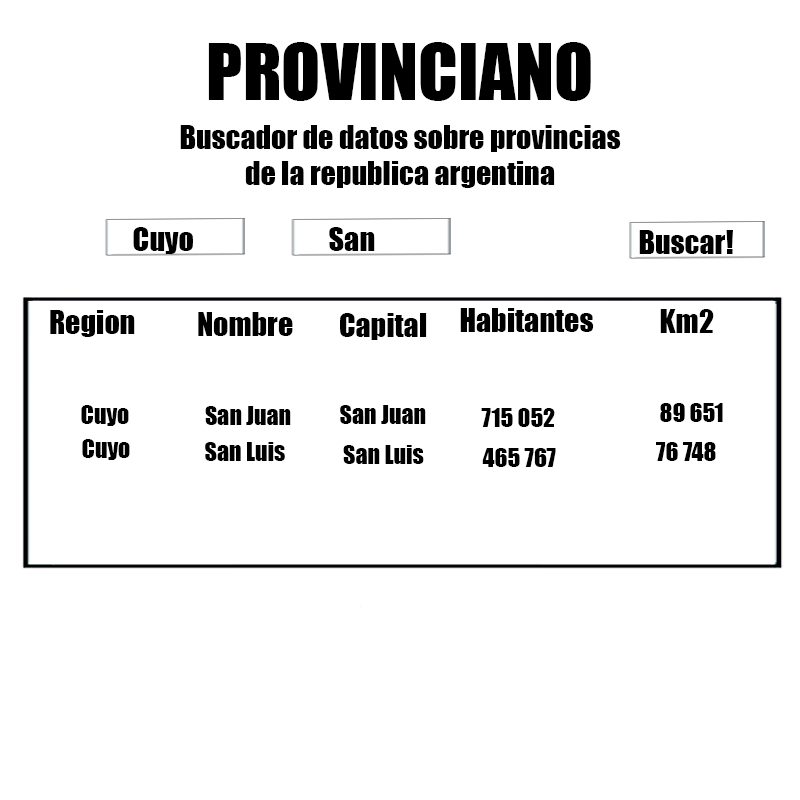
<style>
.page{position:relative;width:800px;height:800px;background:#ffffff}
.page>*{position:absolute;margin:0}
.t1{font:72px "Impact";color:#000000}
.t2{font:30px "Impact";color:#000000}
.t3{font:24px "Impact";color:#000000}
</style>
<div class="page">
<p class="t1" style="left:208px;top:42px;width:383px;height:59px">PROVINCIANO</p>
<p class="t2" style="left:180px;top:125px;width:441px;height:63px;text-align:center">Buscador de datos sobre provincias<br>de la republica argentina</p>
<p class="t2" style="left:133px;top:227px;width:60px;height:27px">Cuyo</p>
<p class="t2" style="left:329px;top:227px;width:46px;height:24px">San</p>
<p class="t2" style="left:639px;top:230px;width:94px;height:24px">Buscar!</p>
<p class="t2" style="left:50px;top:310px;width:85px;height:27px">Region</p>
<p class="t2" style="left:198px;top:312px;width:95px;height:24px">Nombre</p>
<p class="t2" style="left:340px;top:313px;width:87px;height:27px">Capital</p>
<p class="t2" style="left:460px;top:308px;width:134px;height:24px">Habitantes</p>
<p class="t2" style="left:660px;top:309px;width:54px;height:24px">Km2</p>
<p class="t3" style="left:81px;top:405px;width:48px;height:21px">Cuyo</p>
<p class="t3" style="left:205px;top:406px;width:86px;height:19px">San Juan</p>
<p class="t3" style="left:340px;top:405px;width:86px;height:19px">San Juan</p>
<p class="t3" style="left:481px;top:408px;width:74px;height:19px">715 052</p>
<p class="t3" style="left:660px;top:403px;width:63px;height:19px">89 651</p>
<p class="t3" style="left:82px;top:439px;width:48px;height:21px">Cuyo</p>
<p class="t3" style="left:205px;top:442px;width:80px;height:19px">San Luis</p>
<p class="t3" style="left:343px;top:445px;width:81px;height:19px">San Luis</p>
<p class="t3" style="left:482px;top:448px;width:74px;height:19px">465 767</p>
<p class="t3" style="left:656px;top:442px;width:60px;height:19px">76 748</p>
</div>
